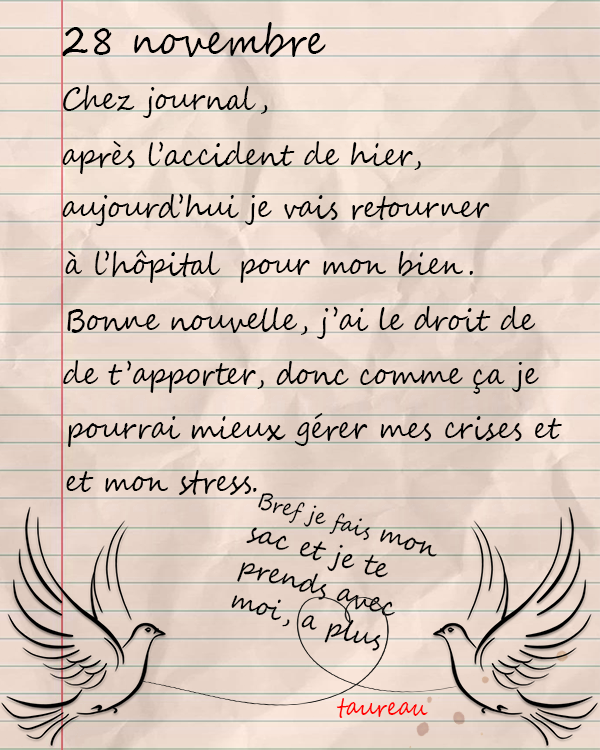
<style>
.page{position:relative;width:600px;height:750px}
.page>*{position:absolute;margin:0}
.t1{font:41.7px "SegoeScript";color:#000000;scale:0.9 1}
.t2{font:30.9px "SegoeScript";color:#000000;scale:0.9 1}
.t3{font:28.8px "SegoeScript";color:#000000;scale:0.9 1}
.t4{font:23.3px "SegoeScript";color:#000000;scale:0.9 1}
.t5{font:25px "SegoeScript";color:#ff0000;scale:0.9 1}
</style>
<div class="page">
<p class="t1" style="left:62px;top:22px;width:264px;height:35px">28 novembre</p>
<p class="t2" style="left:63px;top:85px;width:205px;height:33px">Chez journal,</p>
<p class="t2" style="left:62px;top:141px;width:359px;height:33px">après l’accident de hier,</p>
<p class="t2" style="left:62px;top:193px;width:428px;height:33px">aujourd’hui je vais retourner</p>
<p class="t2" style="left:65px;top:250px;width:408px;height:33px">à l’hôpital  pour mon bien.</p>
<p class="t2" style="left:67px;top:306px;width:469px;height:33px">Bonne nouvelle, j’ai le droit de</p>
<p class="t2" style="left:63px;top:360px;width:476px;height:34px">de t’apporter, donc comme ça je</p>
<p class="t2" style="left:68px;top:413px;width:494px;height:34px">pourrai mieux gérer mes crises et</p>
<p class="t2" style="left:66px;top:470px;width:191px;height:25px">et mon stress.</p>
<p class="t3" style="left:231px;top:493px;width:206px;height:158px;rotate:16deg"><span class="t4">Bref je fais </span>mon sac et je te prends avec moi, a plus</p>
<p class="t5" style="left:336px;top:698px;width:92px;height:20px">taureau</p>
</div>
